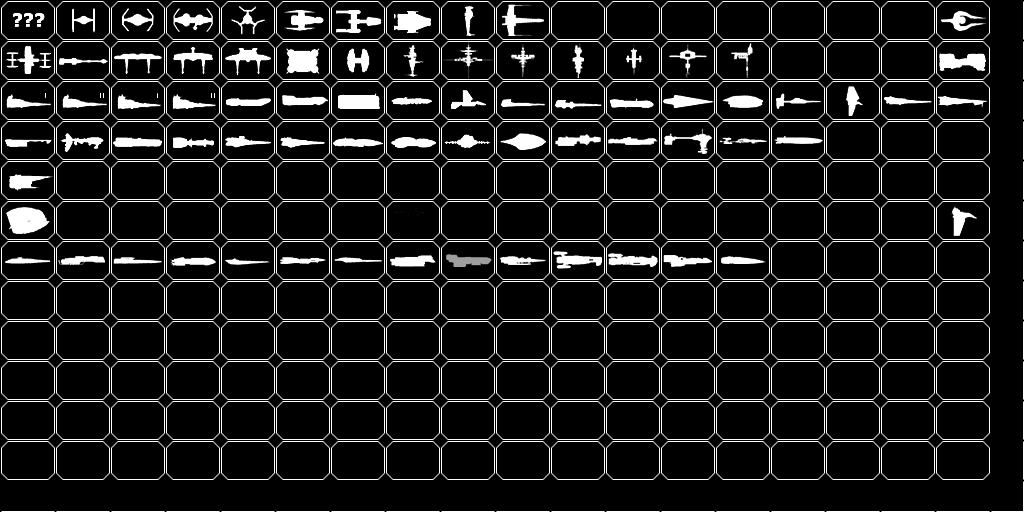
<style>
.page{position:relative;width:1024px;height:512px;background:#000000}
.page>*{position:absolute;margin:0}
.t1{font:18px "Verdana-Bold";color:#ffffff}
</style>
<div class="page">
<p class="t1" style="left:13px;top:13px;width:32px;height:14px">???</p>
</div>
